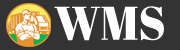
<style>
.page{position:relative;width:180px;height:50px;background:#333333}
.page>*{position:absolute;margin:0}
.t1{font:46.6px "AbrilFatface-Regular";color:#ffffff}
</style>
<div class="page">
<p class="t1" style="left:54px;top:6px;width:110px;height:35px">WMS</p>
</div>
